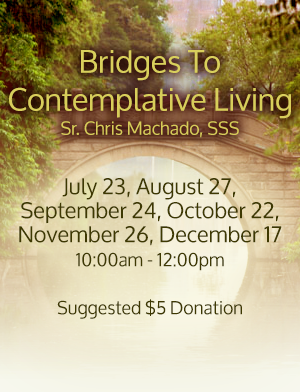
<style>
.page{position:relative;width:300px;height:392px}
.page>*{position:absolute;margin:0}
.t1{font:31px/38px "Oxygen";color:#d9cf5c}
.t2{font:18px/24px "Oxygen";color:#d9cf5c}
.t3{font:22px/24px "Oxygen";color:#3e3902}
.t4{font:18px/24px "Oxygen";color:#3e3902}
</style>
<div class="page">
<p class="t1" style="left:9px;top:50px;width:282px;height:88px;text-align:center">Bridges To Contemplative Living<br><span class="t2">Sr. Chris Machado, SSS</span></p>
<p class="t3" style="left:19px;top:178px;width:263px;height:141px;text-align:center">July 23, August 27, <br>September 24, October 22, <br>November 26, December 17<br><span class="t4">10:00am - 12:00pm<br><br>Suggested $5 Donation</span></p>
</div>
